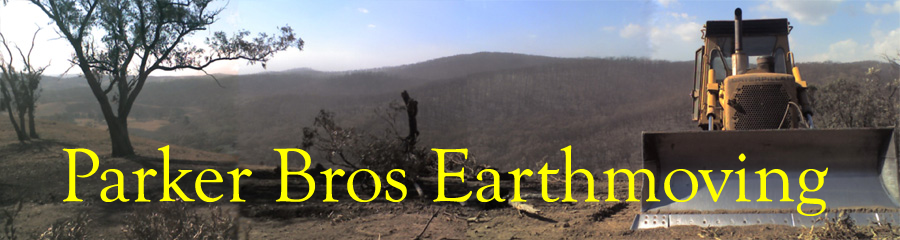
<style>
.page{position:relative;width:900px;height:240px}
.page>*{position:absolute;margin:0}
.t1{font:77.8px "GoudyOldStyleT-Regular";color:#ffff00}
</style>
<div class="page">
<p class="t1" style="left:62px;top:145px;width:766px;height:71px">Parker Bros Earthmoving</p>
</div>
